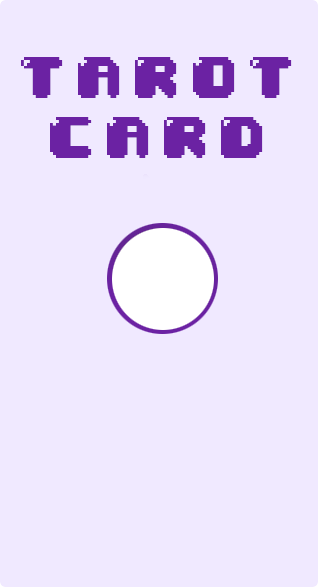
<style>
.page{position:relative;width:318px;height:587px;background:#f0e9ff}
.page>*{position:absolute;margin:0}
.t1{font:50px "04b30";letter-spacing:0.2em;color:#6b22a3}
</style>
<div class="page">
<p class="t1" style="left:21px;top:57px;width:271px;height:101px;text-align:center">TAROT<br>CARD<br>C</p>
</div>
